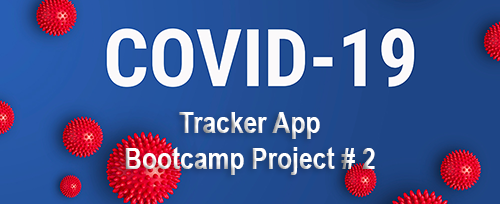
<style>
.page{position:relative;width:500px;height:204px}
.page>*{position:absolute;margin:0}
.t1{font:30px "ArialNarrow-Bold"}
</style>
<div class="page">
<p class="t1" style="left:125px;top:112px;width:250px;height:63px;text-align:center">Tracker App<br>Bootcamp Project # 2</p>
</div>
